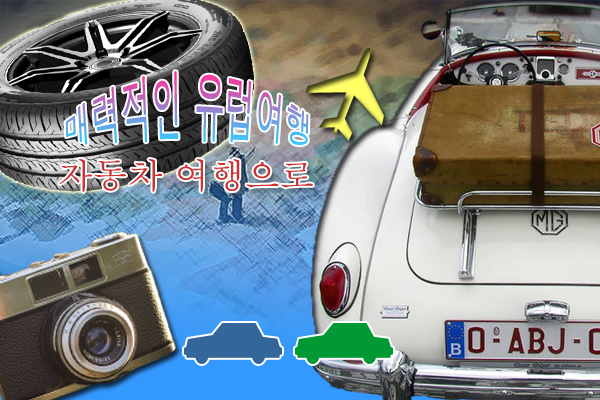
<style>
.page{position:relative;width:600px;height:400px}
.page>*{position:absolute;margin:0}
.t1{font:30px "Dotum"}
.t2{font:35px "Batang";color:#cc3333}
</style>
<div class="page">
<p class="t1" style="left:65px;top:71px;width:244px;height:74px">매력적인 유럽여행</p>
<p class="t2" style="left:59px;top:159px;width:254px;height:33px">자동차 여행으로</p>
</div>
